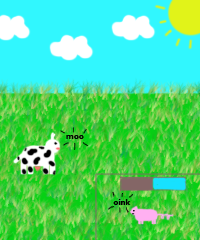
<style>
.page{position:relative;width:200px;height:240px;background:#31f7fe}
.page>*{position:absolute;margin:0}
.t1{font:8.3px "GillSansMT-Bold";color:#020202}
.t2{font:8.3px "GillSansMT-Bold";color:#000000}
</style>
<div class="page">
<p class="t1" style="left:66px;top:135px;width:18px;height:4px">moo</p>
<p class="t2" style="left:113px;top:199px;width:18px;height:6px">oink</p>
</div>
